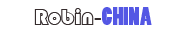
<style>
.page{position:relative;width:183px;height:34px;background:#ffffff}
.page>*{position:absolute;margin:0}
.t1{font:23.3px "STCaiyun";color:#352c2d}
.t2{font:23.3px "ArialMT";color:#352c2d}
.t3{font:23.3px "PoplarStd";color:#5457e4}
</style>
<div class="page">
<p class="t1" style="left:34px;top:7px;width:118px;height:18px">Robin<span class="t2">-</span><span class="t3">CHINA</span></p>
</div>
